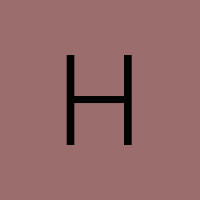
<style>
.page{position:relative;width:200px;height:200px;background:#9b6d6d}
.page>*{position:absolute;margin:0}
.t1{font:125px "MalgunGothic-Semilight";color:#030303}
</style>
<div class="page">
<p class="t1" style="left:66px;top:55px;width:66px;height:90px">H</p>
</div>
